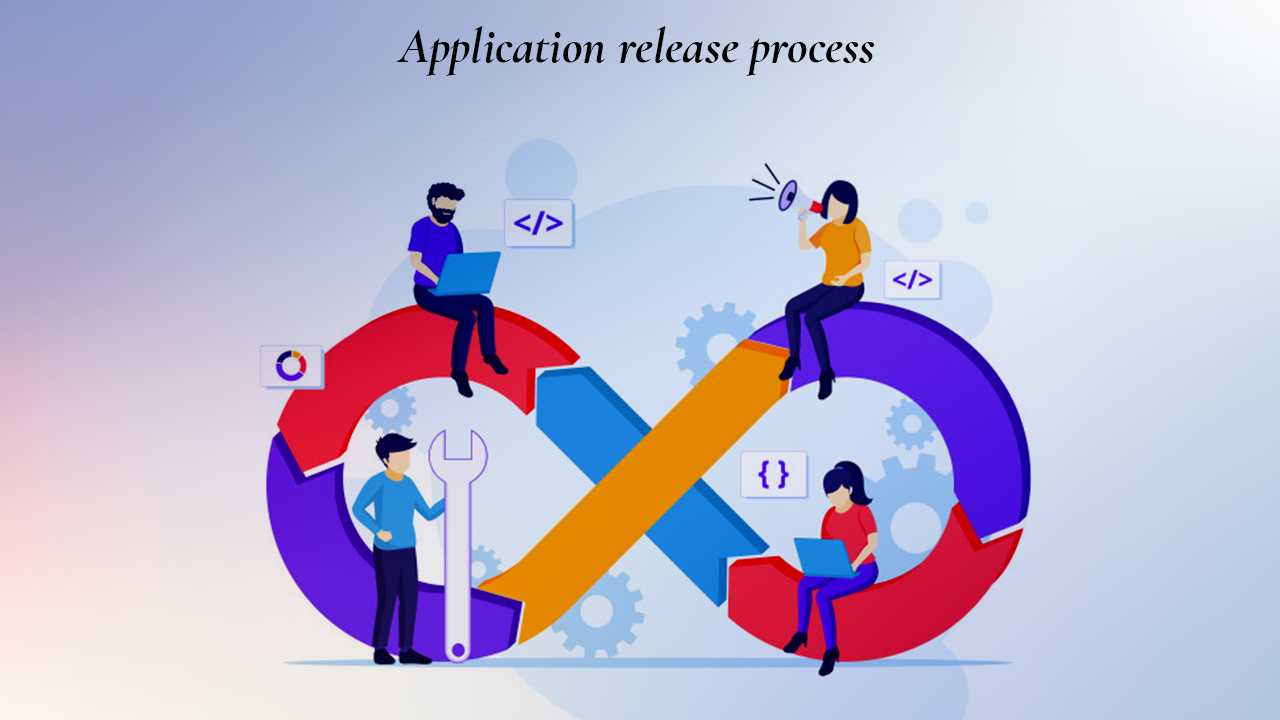
<style>
.page{position:relative;width:1280px;height:720px}
.page>*{position:absolute;margin:0}
.t1{font:50.1px "CormorantGaramond-BoldItalic";color:#000000}
</style>
<div class="page">
<p class="t1" style="left:397px;top:26px;width:478px;height:50px">Application release process</p>
</div>
